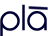
<style>
.page{position:relative;width:48px;height:36px;background:#ffffff}
.page>*{position:absolute;margin:0}
.t1{font:33.2px "AbeatbyKai";color:#000033}
</style>
<div class="page">
<p class="t1" style="left:0px;top:4px;width:47px;height:34px">pla</p>
</div>
